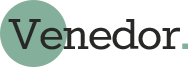
<style>
.page{position:relative;width:188px;height:67px;background:#ffffff}
.page>*{position:absolute;margin:0}
.t1{font:53px "Rokkitt";letter-spacing:-0.025em;color:#282926}
.t2{font:53px "Rokkitt";letter-spacing:-0.025em;color:#84af9b}
</style>
<div class="page">
<p class="t1" style="left:8px;top:19px;width:180px;height:31px">Venedor<span class="t2">.</span></p>
</div>
